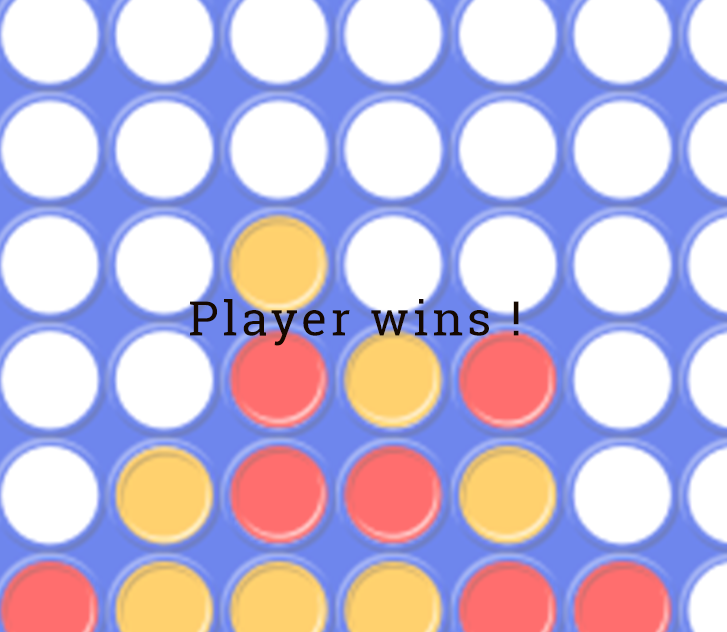
<style>
.page{position:relative;width:727px;height:632px;background:#ffffff}
.page>*{position:absolute;margin:0}
.t1{font:48px "RobotoSlab-Regular";letter-spacing:0.075em;color:#150800}
</style>
<div class="page">
<p class="t1" style="left:190px;top:299px;width:329px;height:47px">Player wins !</p>
</div>
